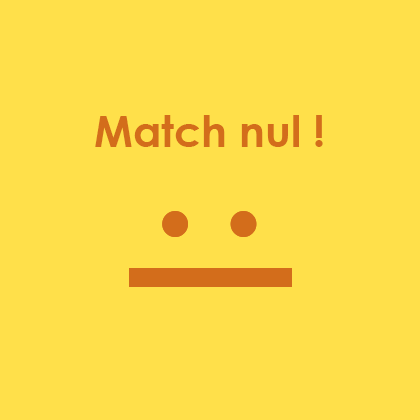
<style>
.page{position:relative;width:420px;height:420px;background:#ffe04a}
.page>*{position:absolute;margin:0}
.t1{font:43px "CenturyGothic-Bold";color:#d36d1b}
</style>
<div class="page">
<p class="t1" style="left:95px;top:115px;width:228px;height:32px">Match nul !</p>
</div>
